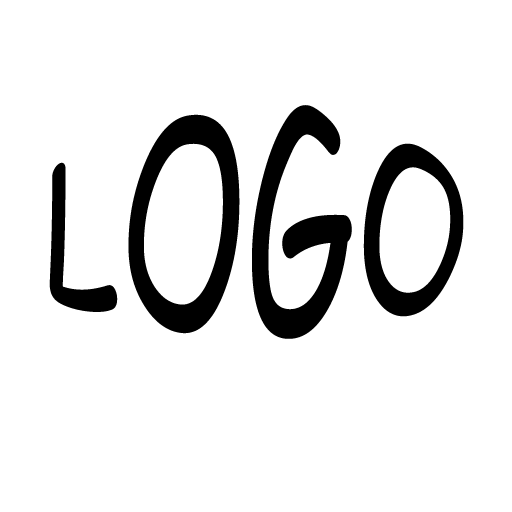
<style>
.page{position:relative;width:512px;height:512px;background:#ffffff}
.page>*{position:absolute;margin:0}
.t1{font:150px "ComicSansMS";color:#000000}
</style>
<div class="page">
<p class="t1" style="left:49px;top:105px;width:415px;height:234px">LOGO</p>
</div>
